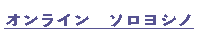
<style>
.page{position:relative;width:200px;height:42px;background:#ffffff}
.page>*{position:absolute;margin:0}
.t1{font:15.7px "ToppanBunkyuMidashiGothicStdN-ExtraBold";color:#575392;text-decoration:underline;scale:1.09 1}
</style>
<div class="page">
<p class="t1" style="left:4px;top:14px;width:190px;height:15px">オンライン　ソロヨシノ</p>
</div>
